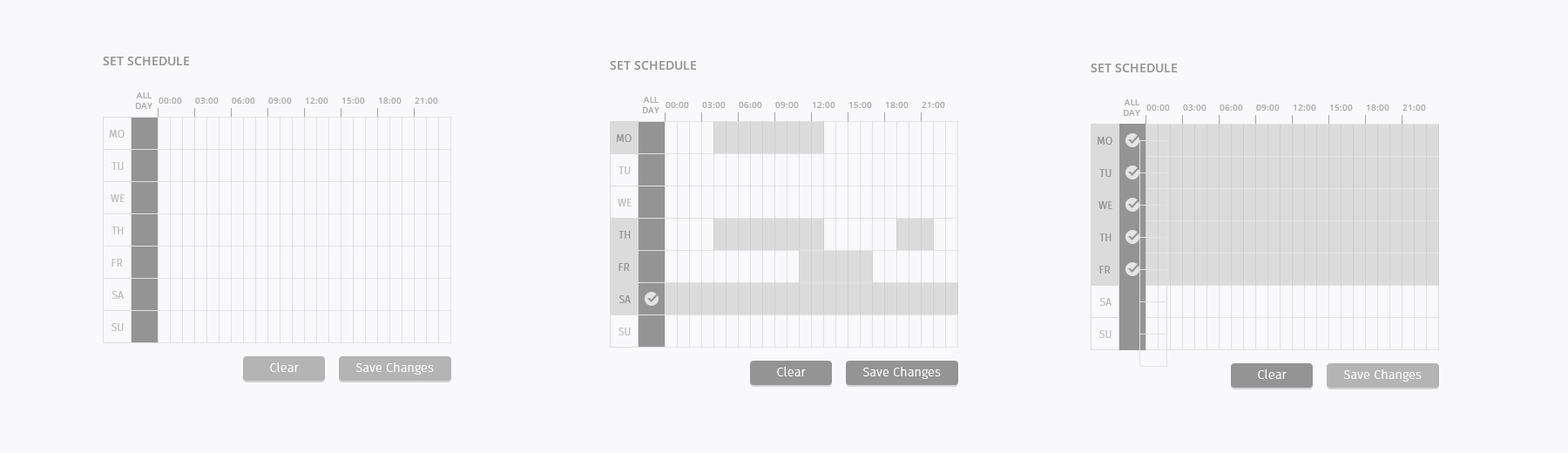
<style>
.page{position:relative;width:1568px;height:453px;background:#f9f9fb}
.page>*{position:absolute;margin:0}
.t1{font:12.2px "OpenSans-Semibold";color:#949494;text-transform:uppercase}
.t2{font:8.7px "OpenSans-Semibold";color:#aaaaaa;text-transform:uppercase}
.t3{font:8.7px "OpenSans-Semibold";color:#aaaaaa}
.t4{font:10.5px "FiraSans-Light";letter-spacing:0.025em;color:#b7b7b7;text-transform:uppercase}
.t5{font:10.5px "FiraSans-Light";letter-spacing:0.025em;color:#8c8c8c;text-transform:uppercase}
.t6{font:12.2px "FiraSans-Light";letter-spacing:0.025em;color:#ffffff}
</style>
<div class="page">
<p class="t1" style="left:103px;top:57px;width:86px;height:8px">set schedule</p>
<p class="t1" style="left:610px;top:61px;width:86px;height:9px">set schedule</p>
<p class="t1" style="left:1091px;top:64px;width:86px;height:8px">set schedule</p>
<p class="t2" style="left:136px;top:92px;width:16px;height:17px;text-align:center">All<br>day</p>
<p class="t3" style="left:159px;top:98px;width:23px;height:6px">00:00</p>
<p class="t3" style="left:195px;top:98px;width:24px;height:6px">03:00</p>
<p class="t3" style="left:232px;top:98px;width:23px;height:6px">06:00</p>
<p class="t3" style="left:268px;top:98px;width:24px;height:6px">09:00</p>
<p class="t3" style="left:305px;top:98px;width:23px;height:6px">12:00</p>
<p class="t3" style="left:341px;top:98px;width:24px;height:6px">15:00</p>
<p class="t3" style="left:378px;top:98px;width:24px;height:6px">18:00</p>
<p class="t3" style="left:415px;top:98px;width:23px;height:6px">21:00</p>
<p class="t2" style="left:643px;top:97px;width:16px;height:16px;text-align:center">All<br>day</p>
<p class="t3" style="left:666px;top:102px;width:23px;height:6px">00:00</p>
<p class="t3" style="left:702px;top:102px;width:24px;height:6px">03:00</p>
<p class="t3" style="left:739px;top:102px;width:23px;height:6px">06:00</p>
<p class="t3" style="left:775px;top:102px;width:24px;height:6px">09:00</p>
<p class="t3" style="left:812px;top:102px;width:23px;height:6px">12:00</p>
<p class="t3" style="left:848px;top:102px;width:24px;height:6px">15:00</p>
<p class="t3" style="left:885px;top:102px;width:24px;height:6px">18:00</p>
<p class="t3" style="left:922px;top:102px;width:23px;height:6px">21:00</p>
<p class="t2" style="left:1124px;top:99px;width:16px;height:17px;text-align:center">All<br>day</p>
<p class="t3" style="left:1146px;top:105px;width:24px;height:6px">00:00</p>
<p class="t3" style="left:1183px;top:105px;width:23px;height:6px">03:00</p>
<p class="t3" style="left:1220px;top:105px;width:23px;height:6px">06:00</p>
<p class="t3" style="left:1256px;top:105px;width:24px;height:6px">09:00</p>
<p class="t3" style="left:1293px;top:105px;width:23px;height:6px">12:00</p>
<p class="t3" style="left:1329px;top:105px;width:24px;height:6px">15:00</p>
<p class="t3" style="left:1366px;top:105px;width:23px;height:6px">18:00</p>
<p class="t3" style="left:1402px;top:105px;width:24px;height:6px">21:00</p>
<p class="t4" style="left:109px;top:130px;width:16px;height:8px">mo</p>
<p class="t5" style="left:616px;top:134px;width:16px;height:8px">mo</p>
<p class="t5" style="left:1097px;top:137px;width:15px;height:8px">mo</p>
<p class="t4" style="left:112px;top:162px;width:12px;height:8px">tu</p>
<p class="t4" style="left:618px;top:166px;width:13px;height:8px">tu</p>
<p class="t5" style="left:1099px;top:169px;width:13px;height:8px">tu</p>
<p class="t4" style="left:111px;top:194px;width:14px;height:8px">we</p>
<p class="t4" style="left:618px;top:199px;width:14px;height:7px">we</p>
<p class="t5" style="left:1098px;top:201px;width:14px;height:8px">we</p>
<p class="t4" style="left:112px;top:226px;width:12px;height:8px">th</p>
<p class="t5" style="left:618px;top:231px;width:13px;height:8px">th</p>
<p class="t5" style="left:1099px;top:233px;width:13px;height:8px">th</p>
<p class="t4" style="left:112px;top:259px;width:11px;height:8px">fr</p>
<p class="t5" style="left:618px;top:263px;width:12px;height:8px">fr</p>
<p class="t5" style="left:1099px;top:266px;width:12px;height:8px">fr</p>
<p class="t4" style="left:112px;top:291px;width:12px;height:8px">sa</p>
<p class="t5" style="left:619px;top:295px;width:12px;height:8px">sa</p>
<p class="t4" style="left:1100px;top:298px;width:12px;height:8px">sa</p>
<p class="t4" style="left:112px;top:323px;width:12px;height:8px">su</p>
<p class="t4" style="left:618px;top:328px;width:13px;height:7px">su</p>
<p class="t4" style="left:1099px;top:330px;width:13px;height:8px">su</p>
<p class="t6" style="left:270px;top:362px;width:29px;height:10px">Clear</p>
<p class="t6" style="left:356px;top:362px;width:78px;height:13px">Save Changes</p>
<p class="t6" style="left:777px;top:367px;width:29px;height:9px">Clear</p>
<p class="t6" style="left:863px;top:367px;width:78px;height:12px">Save Changes</p>
<p class="t6" style="left:1258px;top:369px;width:29px;height:10px">Clear</p>
<p class="t6" style="left:1344px;top:369px;width:78px;height:13px">Save Changes</p>
</div>
